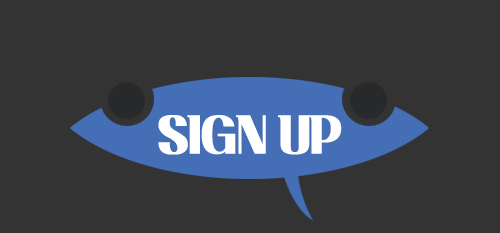
<style>
.page{position:relative;width:500px;height:233px;background:#333333}
.page>*{position:absolute;margin:0}
.t1{font:48px "KoreanBDCS-R";letter-spacing:-0.05em;color:#ffffff}
</style>
<div class="page">
<p class="t1" style="left:158px;top:115px;width:184px;height:40px">SIGN UP</p>
</div>
